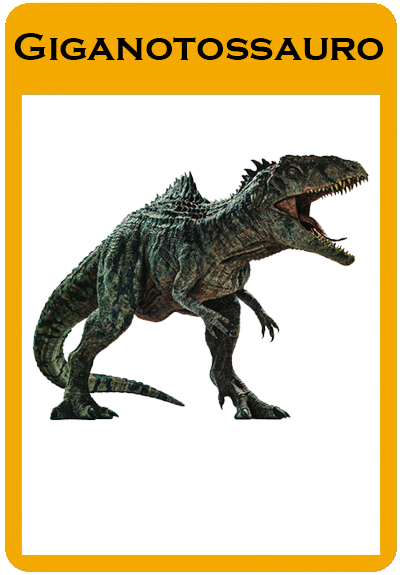
<style>
.page{position:relative;width:400px;height:575px;background:#ffffff}
.page>*{position:absolute;margin:0}
.t1{font:40px "CopperplateGothic-Bold";color:#000000}
</style>
<div class="page">
<p class="t1" style="left:14px;top:33px;width:369px;height:27px">Giganotossauro</p>
</div>
